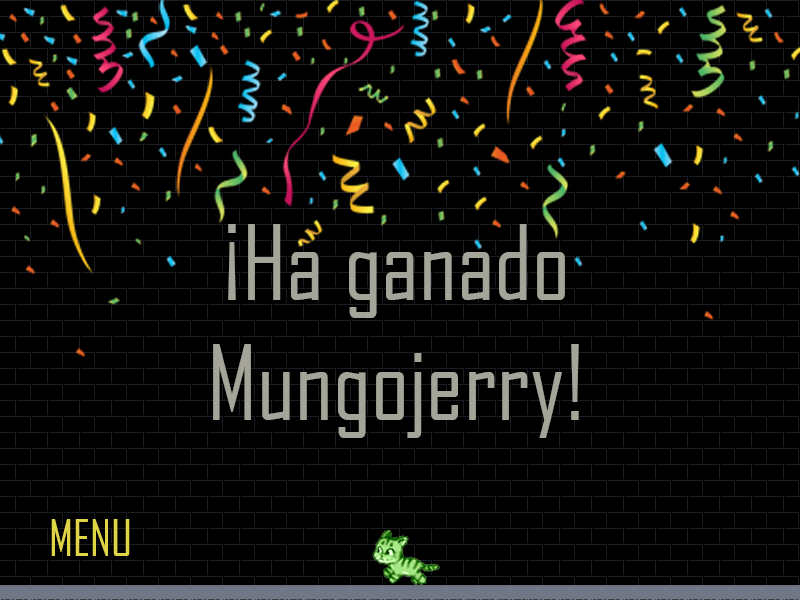
<style>
.page{position:relative;width:800px;height:600px;background:#000000}
.page>*{position:absolute;margin:0}
.t1{font:100px "AgencyFB-Reg";color:#a5a498}
.t2{font:48px "AgencyFB-Reg";color:#dfd547}
</style>
<div class="page">
<p class="t1" style="left:213px;top:224px;width:366px;height:214px;text-align:center">¡Ha ganado Mungojerry!</p>
<p class="t2" style="left:51px;top:519px;width:79px;height:37px">MENU</p>
</div>
